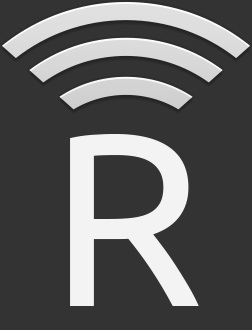
<style>
.page{position:relative;width:252px;height:330px;background:#333333}
.page>*{position:absolute;margin:0}
.t1{font:245px "Ubuntu";color:#f3f3f3}
</style>
<div class="page">
<p class="t1" style="left:70px;top:134px;width:129px;height:172px">R</p>
</div>
